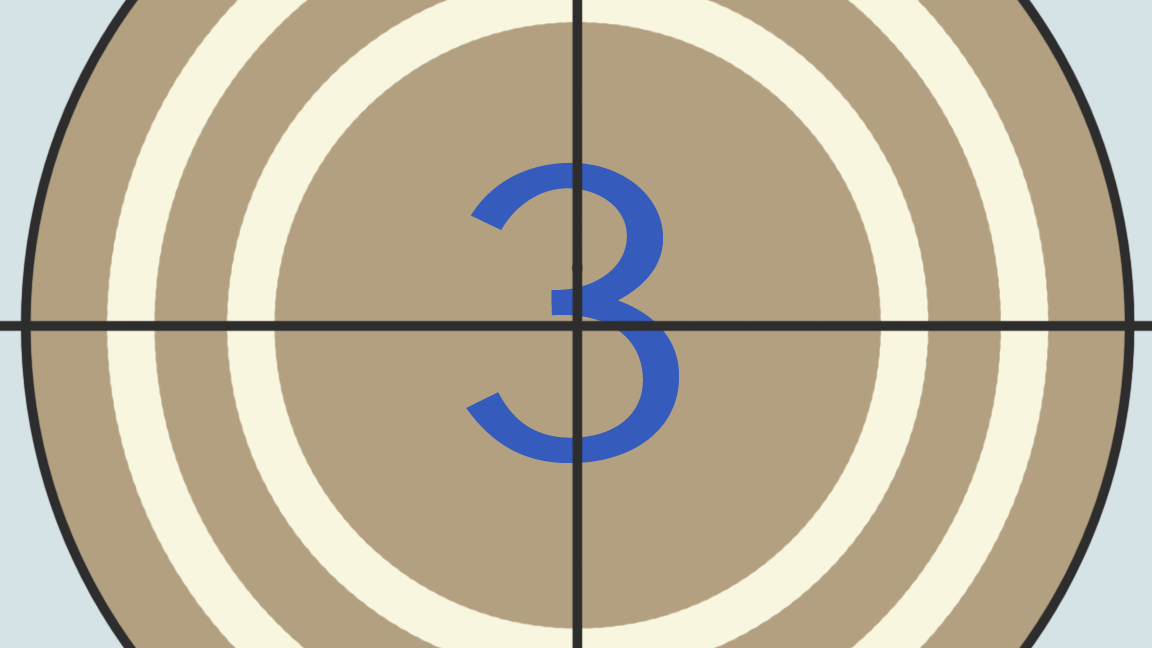
<style>
.page{position:relative;width:1152px;height:648px;background:#b2a080}
.page>*{position:absolute;margin:0}
.t1{font:400px "LetterGothicStd-Bold";letter-spacing:0.01em;color:#355bbc;scale:1.2 1}
</style>
<div class="page">
<p class="t1" style="left:466px;top:162px;width:213px;height:301px">3</p>
</div>
